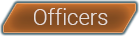
<style>
.page{position:relative;width:139px;height:36px}
.page>*{position:absolute;margin:0}
.t1{font:22px "Roboto-Light";color:#e3dad5}
</style>
<div class="page">
<p class="t1" style="left:34px;top:8px;width:74px;height:17px">Officers</p>
</div>
